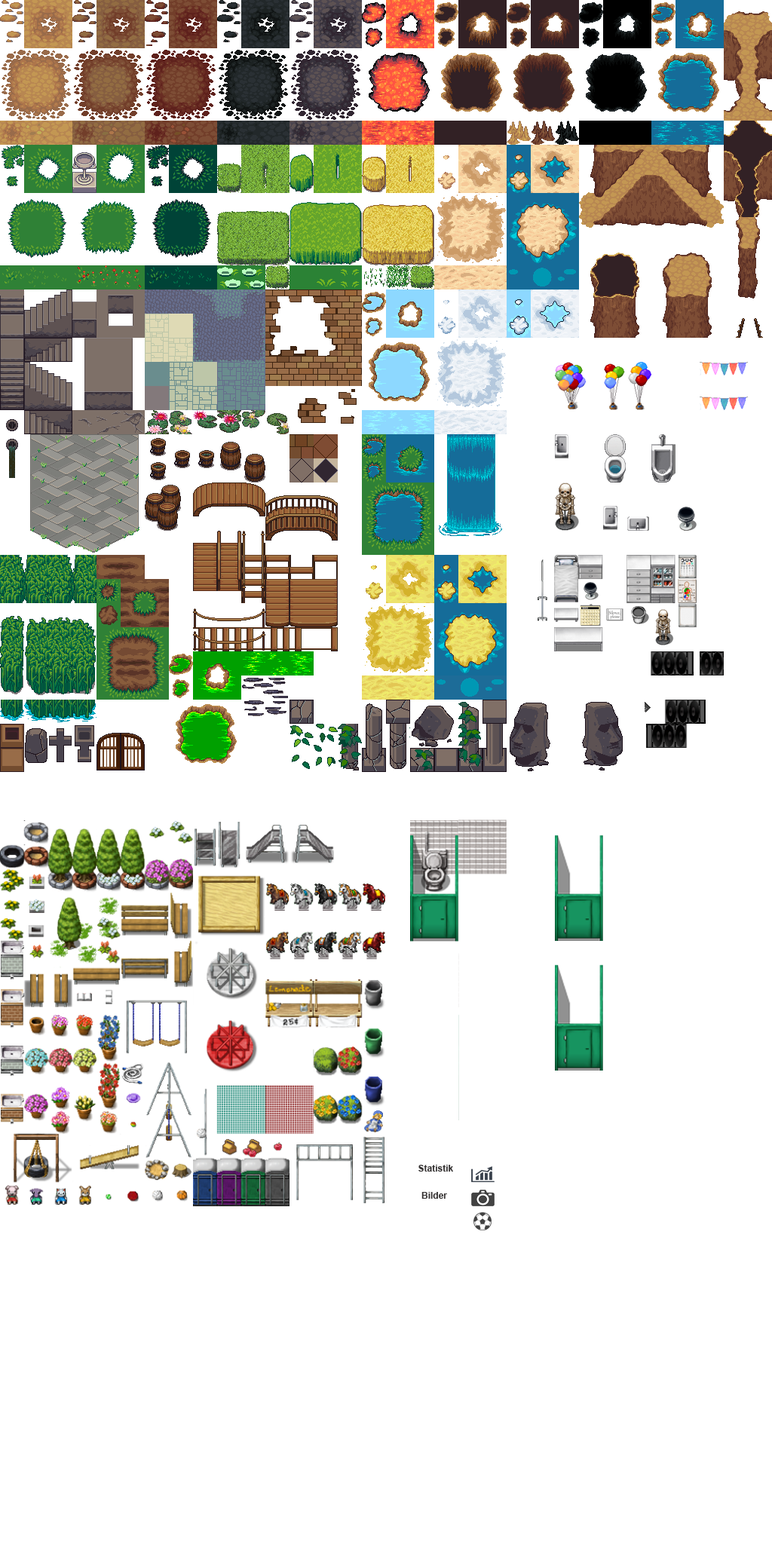
<style>
.page{position:relative;width:772px;height:1544px;background:#ffffff}
.page>*{position:absolute;margin:0}
.t1{font:9px "Arial-BoldMT";color:#373434}
</style>
<div class="page">
<p class="t1" style="left:418px;top:1165px;width:35px;height:7px">Statistik</p>
<p class="t1" style="left:422px;top:1192px;width:25px;height:7px">Bilder</p>
</div>
